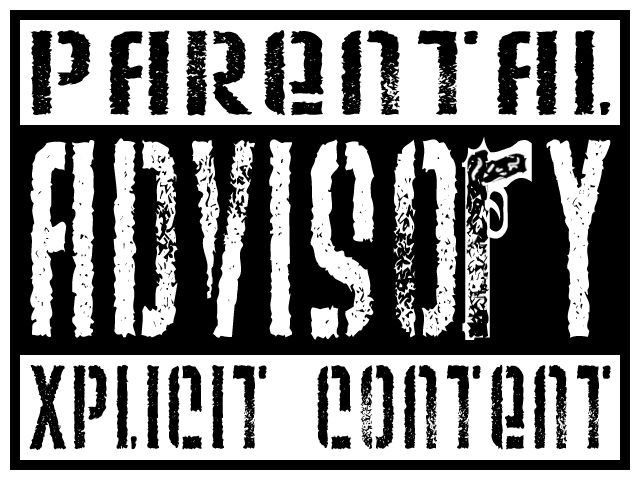
<style>
.page{position:relative;width:640px;height:480px;background:#000000}
.page>*{position:absolute;margin:0}
.t1{font:119.7px "WeltronUrban";color:#000000;scale:1.49 1}
.t2{font:280px "WeltronUrban";color:#ffffff;scale:0.68 1}
.t3{font:314.4px "Mobsters";color:#ffffff;scale:0.68 1}
.t4{font:118.7px "WeltronUrban";color:#000000;scale:0.84 1}
</style>
<div class="page">
<p class="t1" style="left:30px;top:30px;width:581px;height:86px">PARENTAL</p>
<p class="t2" style="left:30px;top:137px;width:581px;height:203px">ADVISO<span class="t3">r</span>Y</p>
<p class="t4" style="left:29px;top:364px;width:582px;height:86px">XPLICIT CONTENT</p>
</div>
